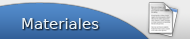
<style>
.page{position:relative;width:190px;height:39px}
.page>*{position:absolute;margin:0}
.t1{font:15px "DejaVuSans";color:#eaf2f6}
</style>
<div class="page">
<p class="t1" style="left:22px;top:18px;width:77px;height:11px">Materiales</p>
</div>
